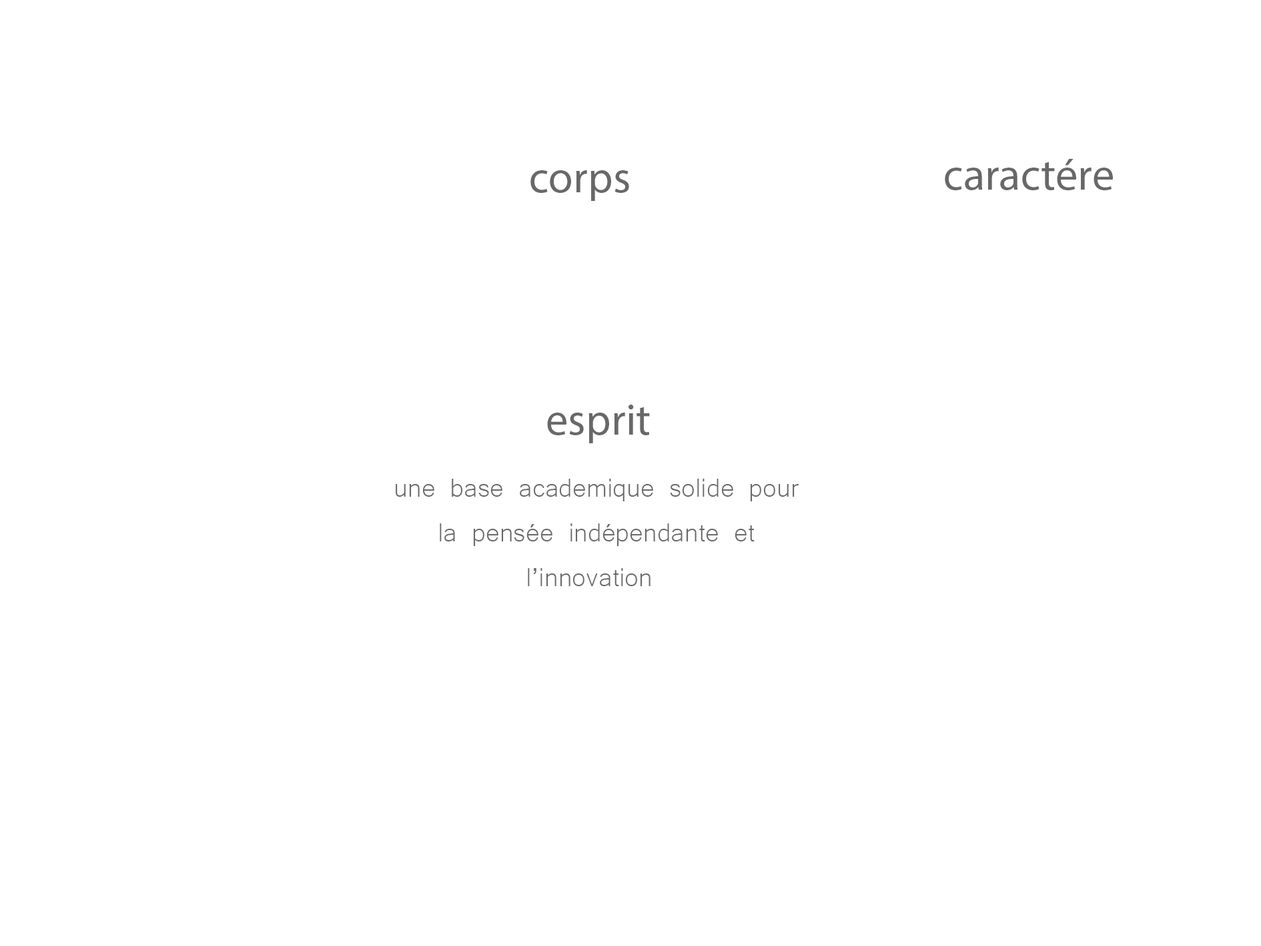
<style>
.page{position:relative;width:1261px;height:946px;background:#ffffff}
.page>*{position:absolute;margin:0}
.t1{font:44.5px "MyriadPro-Regular";color:#686868}
.t2{font:33.4px/44.5px "Microsoft-Yi-Baiti";color:#686868}
</style>
<div class="page">
<p class="t1" style="left:945px;top:159px;width:168px;height:31px">caractére</p>
<p class="t1" style="left:530px;top:170px;width:99px;height:31px">corps</p>
<p class="t1" style="left:547px;top:404px;width:103px;height:39px">esprit</p>
<p class="t2" style="left:396px;top:478px;width:403px;height:108px">une base academique solide pour <br>   la pensée indépendante et <br>         l’innovation</p>
</div>
